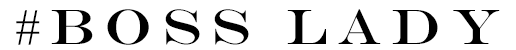
<style>
.page{position:relative;width:516px;height:50px;background:#ffffff}
.page>*{position:absolute;margin:0}
.t1{font:50px "EngraversMT";letter-spacing:0.2em;color:#000000}
</style>
<div class="page">
<p class="t1" style="left:16px;top:9px;width:484px;height:36px">#BOSS LADY</p>
</div>
